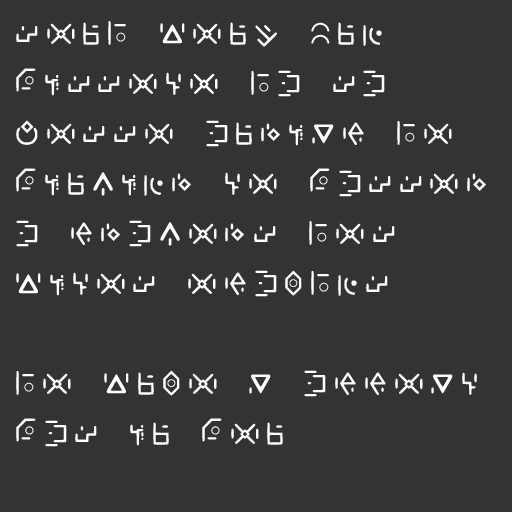
<style>
.page{position:relative;width:512px;height:512px;background:#333333}
.page>*{position:absolute;margin:0}
.t1{font:36px/50px "ResearchFont";letter-spacing:0.25em;color:#ffffff}
</style>
<div class="page">
<p class="t1" style="left:16px;top:21px;width:470px;height:426px">SEUL CEUX QUI POSSEDE LA SAGESSE AURONT LE POUVOIR DE PASSER A TRAVERS LES CODES ETABLIS<br><br>LE CUBE N ATTEND PAS OU PEU</p>
</div>
